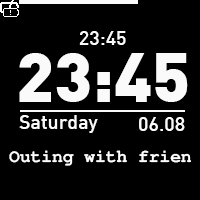
<style>
.page{position:relative;width:200px;height:200px;background:#000000}
.page>*{position:absolute;margin:0}
.t1{font:19.6px "DIN-Medium";color:#fafafa}
.t2{font:68.5px "DIN-Black";color:#fafafa}
.t3{font:17.9px "FreeMonoBold";color:#ffffff}
</style>
<div class="page">
<p class="t1" style="left:79px;top:31px;width:47px;height:14px">23:45</p>
<p class="t2" style="left:19px;top:53px;width:169px;height:49px">23:45</p>
<p class="t1" style="left:19px;top:115px;width:79px;height:18px">Saturday</p>
<p class="t1" style="left:139px;top:117px;width:46px;height:14px">06.08</p>
<p class="t3" style="left:9px;top:150px;width:182px;height:16px">Outing with frien</p>
</div>
